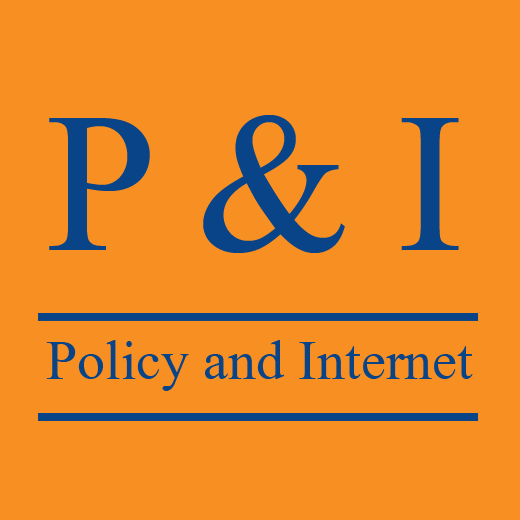
<style>
.page{position:relative;width:520px;height:520px;background:#f78f23}
.page>*{position:absolute;margin:0}
.t1{font:198.7px "MongolianBaiti";color:#084487}
.t2{font:56.1px "MongolianBaiti";color:#084487}
</style>
<div class="page">
<p class="t1" style="left:49px;top:118px;width:410px;height:132px">P     I</p>
<p class="t1" style="left:203px;top:115px;width:142px;height:138px">&amp;</p>
<p class="t2" style="left:46px;top:340px;width:427px;height:51px">Policy and Internet</p>
</div>
